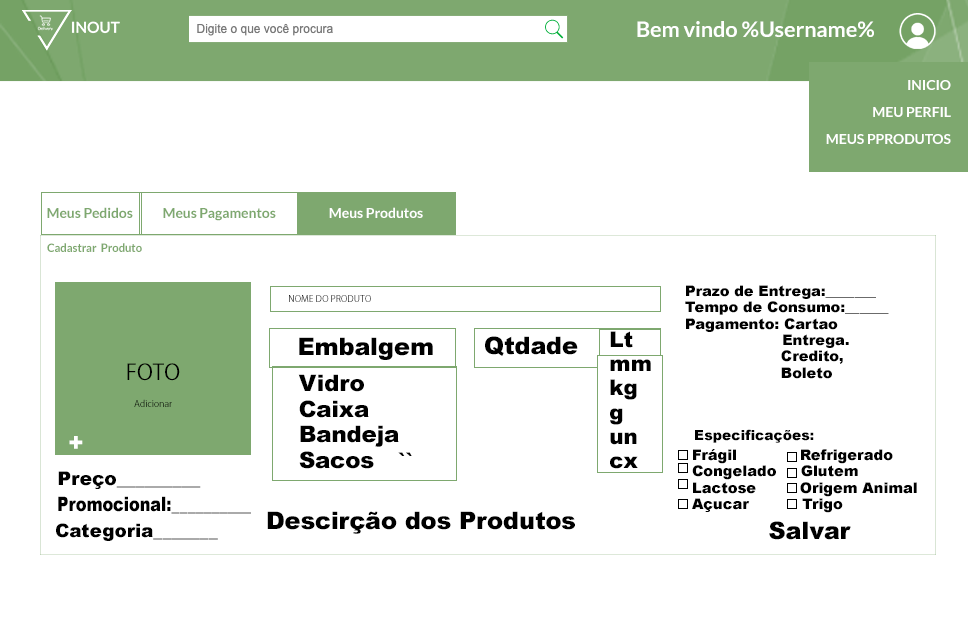
<style>
.page{position:relative;width:968px;height:619px;background:#ffffff}
.page>*{position:absolute;margin:0}
.t1{font:21.7px "Lato-Bold";letter-spacing:-0.005em;color:#ffffff}
.t2{font:14px/27px "Lato-Bold";letter-spacing:-0.005em;color:#ffffff}
.t3{font:14px "Lato-Bold";letter-spacing:-0.005em;color:#7ea86f}
.t4{font:14px "Lato-Bold";letter-spacing:-0.005em;color:#ffffff}
.t5{font:11.6px "Lato-Bold";letter-spacing:-0.005em;color:#7ea86f}
.t6{font:14.6px/16.4px "Arial-Black";letter-spacing:-0.005em;color:#000000}
.t7{font:9px "KozGoPr6N-Regular";letter-spacing:-0.005em}
.t8{font:24px "Arial-Black";letter-spacing:-0.005em;color:#000000}
.t9{font:21.6px/24.3px "Arial-Black";letter-spacing:-0.005em;color:#000000}
.t10{font:9px/27px "KozGoPr6N-Regular";letter-spacing:-0.005em;color:#000000}
.t11{font:21.7px/27px "KozGoPr6N-Regular";letter-spacing:-0.005em;color:#000000}
.t12{font:22.8px/25.6px "Arial-Black";letter-spacing:-0.005em;color:#000000}
.t13{font:24px "Arial-Black";letter-spacing:-0.005em;color:#ffffff}
.t14{font:14px "Arial-Black";letter-spacing:-0.005em;color:#000000}
.t15{font:14.7px/16.6px "Arial-Black";letter-spacing:-0.005em;color:#000000}
.t16{font:18.7px "Arial-Black";letter-spacing:-0.005em;color:#000000}
.t17{font:19.9px "Arial-Black";letter-spacing:-0.005em;color:#000000;scale:0.81 1}
.t18{font:18.6px "Arial-Black";letter-spacing:-0.005em;color:#000000}
</style>
<div class="page">
<p class="t1" style="left:637px;top:21px;width:237px;height:16px">Bem vindo %Username%</p>
<p class="t2" style="left:826px;top:80px;width:125px;height:64px;text-align:right">INICIO <br>MEU PERFIL<br>MEUS PPRODUTOS</p>
<p class="t3" style="left:47px;top:207px;width:86px;height:11px">Meus Pedidos</p>
<p class="t3" style="left:163px;top:208px;width:113px;height:13px">Meus Pagamentos</p>
<p class="t4" style="left:329px;top:207px;width:94px;height:11px">Meus Produtos</p>
<p class="t5" style="left:47px;top:243px;width:95px;height:9px">Cadastrar  Produto</p>
<p class="t6" style="left:685px;top:285px;width:204px;height:94px">Prazo de Entrega:_______<br>Tempo de Consumo:______<br>Pagamento: Cartao<br>      Entrega. <br>                    Credito,<br>                    Boleto</p>
<p class="t7" style="left:289px;top:295px;width:82px;height:7px">NOME DO PRODUTO</p>
<p class="t8" style="left:299px;top:337px;width:134px;height:23px">Embalgem</p>
<p class="t8" style="left:485px;top:336px;width:93px;height:20px">Qtdade</p>
<p class="t9" style="left:610px;top:331px;width:41px;height:138px">Lt<br>mm<br>kg<br>g<br>un<br>cx</p>
<p class="t10" style="left:127px;top:363px;width:53px;height:44px;text-align:center"><span class="t11"><br><br><br>FOTO <br></span>Adicionar</p>
<p class="t12" style="left:298px;top:374px;width:101px;height:95px">Vidro <br>Caixa<br>Bandeja<br>Sacos<br>nehuma</p>
<p class="t13" style="left:69px;top:436px;width:14px;height:13px">+</p>
<p class="t14" style="left:695px;top:429px;width:119px;height:14px">Especificações:</p>
<p class="t15" style="left:692px;top:449px;width:225px;height:64px">Frágil             Refrigerado<br>Congelado     Glutem <br>Lactose         Origem Animal<br>Açucar           Trigo</p>
<p class="t8" style="left:398px;top:452px;width:14px;height:4px">``</p>
<p class="t16" style="left:58px;top:471px;width:143px;height:18px">Preço_________</p>
<p class="t17" style="left:58px;top:496px;width:193px;height:18px">Promocional:__________</p>
<p class="t8" style="left:267px;top:511px;width:308px;height:23px">Descirção dos Produtos</p>
<p class="t8" style="left:769px;top:521px;width:82px;height:19px">Salvar</p>
<p class="t18" style="left:56px;top:523px;width:162px;height:18px">Categoria_______</p>
</div>
